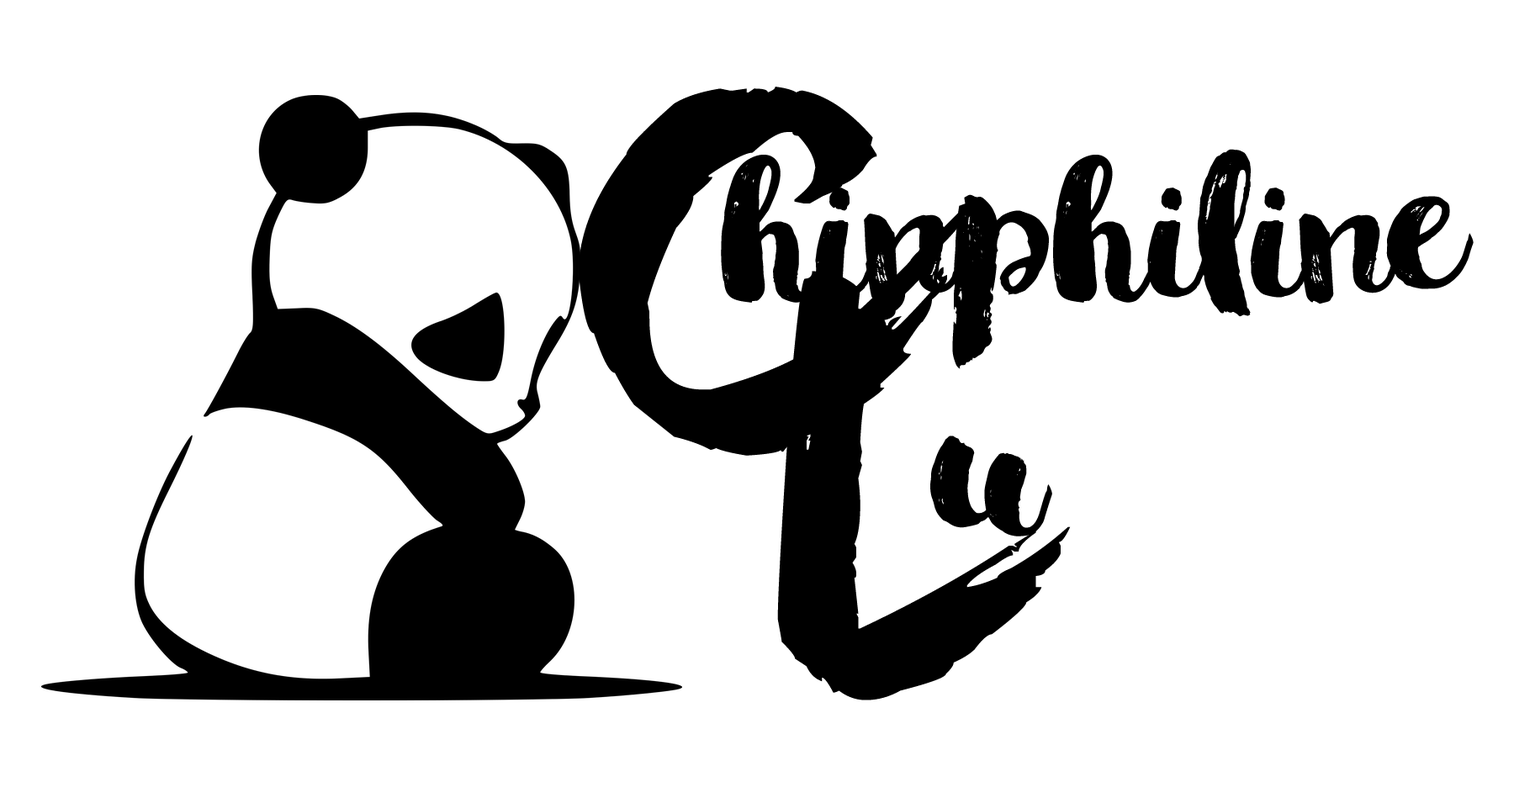
<style>
.page{position:relative;width:1514px;height:787px;background:#ffffff}
.page>*{position:absolute;margin:0}
.t1{font:357.7px "BrownFox";color:#000000}
.t2{font:188.3px "GlamourBrush-Regular";color:#000000}
</style>
<div class="page">
<p class="t1" style="left:578px;top:87px;width:387px;height:369px">C</p>
<p class="t2" style="left:721px;top:149px;width:753px;height:220px">hinphiline</p>
<p class="t1" style="left:777px;top:271px;width:294px;height:430px">L</p>
<p class="t2" style="left:930px;top:436px;width:122px;height:101px">u</p>
</div>
